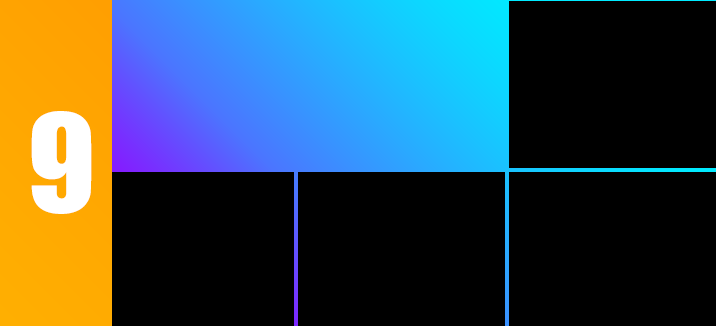
<style>
.page{position:relative;width:716px;height:326px;background:#000000}
.page>*{position:absolute;margin:0}
.t1{font:125px "Impact";color:#ffffff}
</style>
<div class="page">
<p class="t1" style="left:31px;top:111px;width:61px;height:103px">9</p>
</div>
